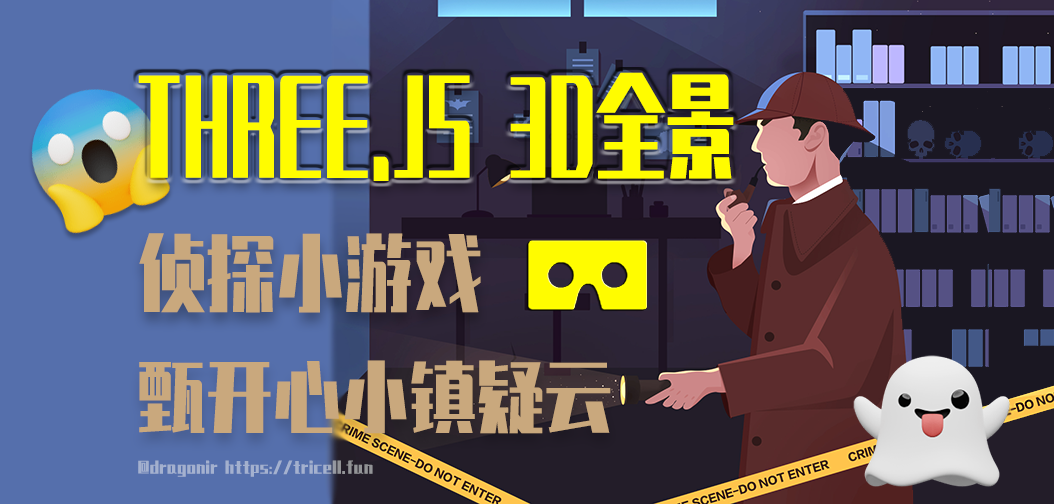
<style>
.page{position:relative;width:1054px;height:504px}
.page>*{position:absolute;margin:0}
.t1{font:111.6px "ZhenyanGB-Regular";color:#fffc00;scale:0.63 1}
.t2{font:82.3px "ZhenyanGB-Regular";color:#c9a87d;scale:0.83 1}
.t3{font:76.2px "ZhenyanGB-Regular";color:#c9a87d;scale:0.89 1}
.t4{font:14.2px "ZhenyanGB-Regular";color:#a3b0ce}
</style>
<div class="page">
<p class="t1" style="left:138px;top:72px;width:596px;height:109px">THREE.JS 3D全景</p>
<p class="t2" style="left:139px;top:233px;width:342px;height:80px">侦探小游戏</p>
<p class="t3" style="left:139px;top:360px;width:472px;height:74px">甄开心小镇疑云</p>
<p class="t4" style="left:138px;top:460px;width:235px;height:17px">@dragonir https://tricell.fun</p>
</div>
